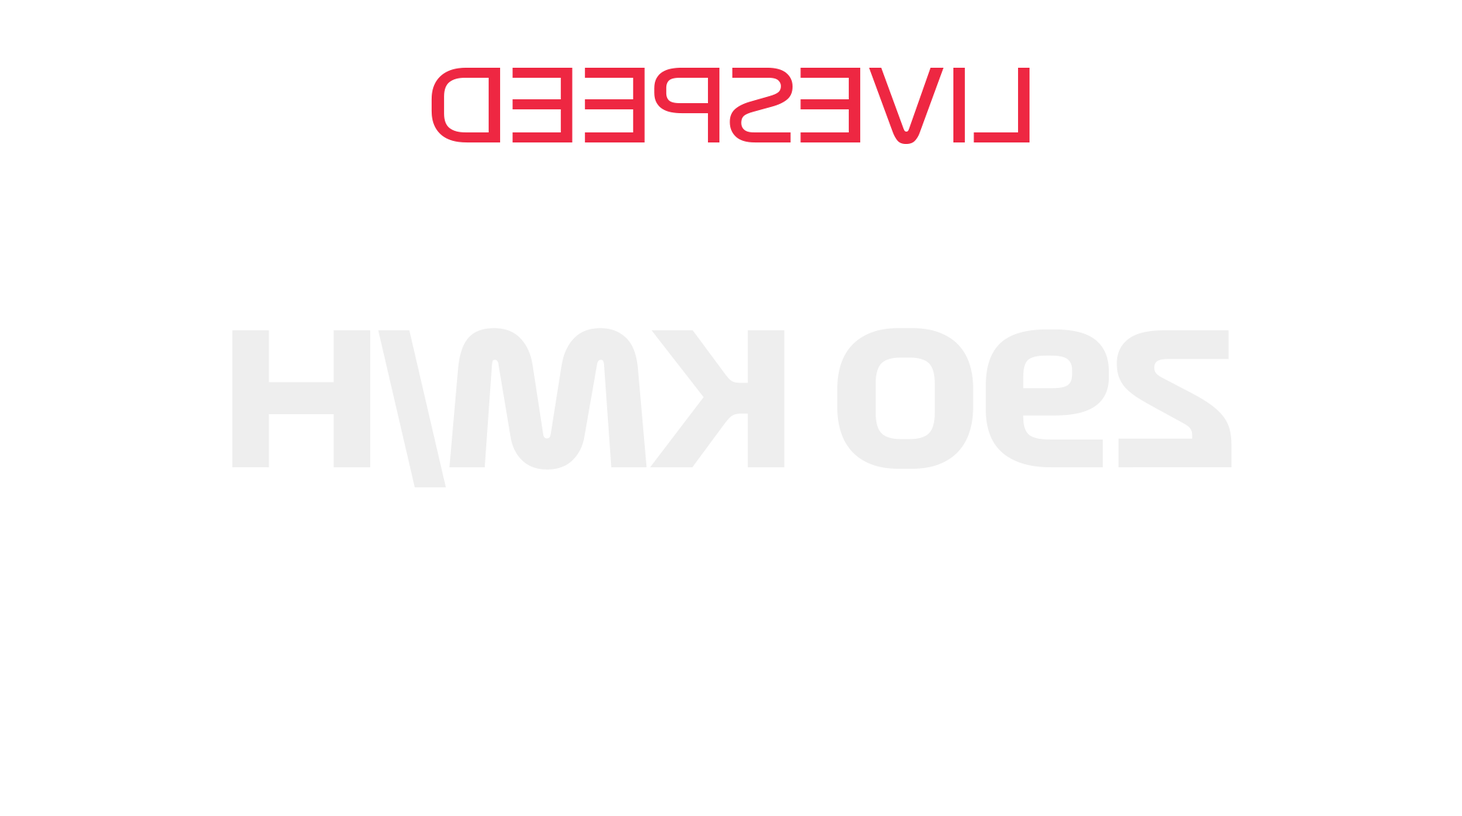
<style>
.page{position:relative;width:1462px;height:816px;background:#ffffff}
.page>*{position:absolute;margin:0}
.t1{font:99.1px "Formula1-Display-Regular";letter-spacing:-0.03em;color:#ee2742;text-transform:uppercase}
.t2{font:182.5px "Formula1-Display-Bold";letter-spacing:-0.03em;color:#eeeeee;text-transform:uppercase}
</style>
<div class="page">
<p class="t1" style="left:431px;top:68px;width:599px;height:76px;rotate:180deg">Livespeed</p>
<p class="t2" style="left:232px;top:328px;width:1000px;height:160px;rotate:180deg">290 km/h</p>
</div>
